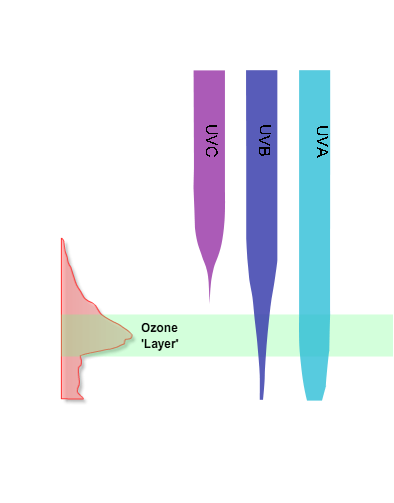
<style>
.page{position:relative;width:394px;height:503px;background:#ffffff}
.page>*{position:absolute;margin:0}
.t1{font:15.8px "ArialMT";color:#000000}
</style>
<div class="page">
<p class="t1" style="left:206px;top:125px;width:12px;height:32px;rotate:90deg">UVC</p>
<p class="t1" style="left:259px;top:125px;width:12px;height:31px;rotate:91deg">UVB</p>
<p class="t1" style="left:317px;top:126px;width:11px;height:32px;rotate:91deg">UVA</p>
</div>
